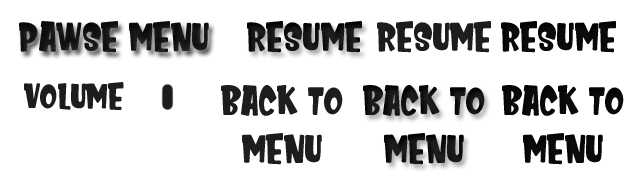
<style>
.page{position:relative;width:640px;height:196px;background:#ffffff}
.page>*{position:absolute;margin:0}
.t1{font:40px "KidsZone";color:#1d1d1d}
.t2{font:36px "KidsZone";color:#1d1d1d}
</style>
<div class="page">
<p class="t1" style="left:19px;top:21px;width:190px;height:32px">Pawse menu</p>
<p class="t1" style="left:247px;top:21px;width:115px;height:32px">RESUME</p>
<p class="t1" style="left:377px;top:21px;width:114px;height:32px">resume</p>
<p class="t1" style="left:501px;top:21px;width:115px;height:32px">Resume</p>
<p class="t2" style="left:24px;top:82px;width:100px;height:28px">volume</p>
<p class="t1" style="left:221px;top:85px;width:122px;height:80px;text-align:center">back to <br>menu</p>
<p class="t1" style="left:363px;top:85px;width:122px;height:80px;text-align:center">back to <br>menu</p>
<p class="t1" style="left:502px;top:85px;width:122px;height:80px;text-align:center">back to <br>menu</p>
</div>
